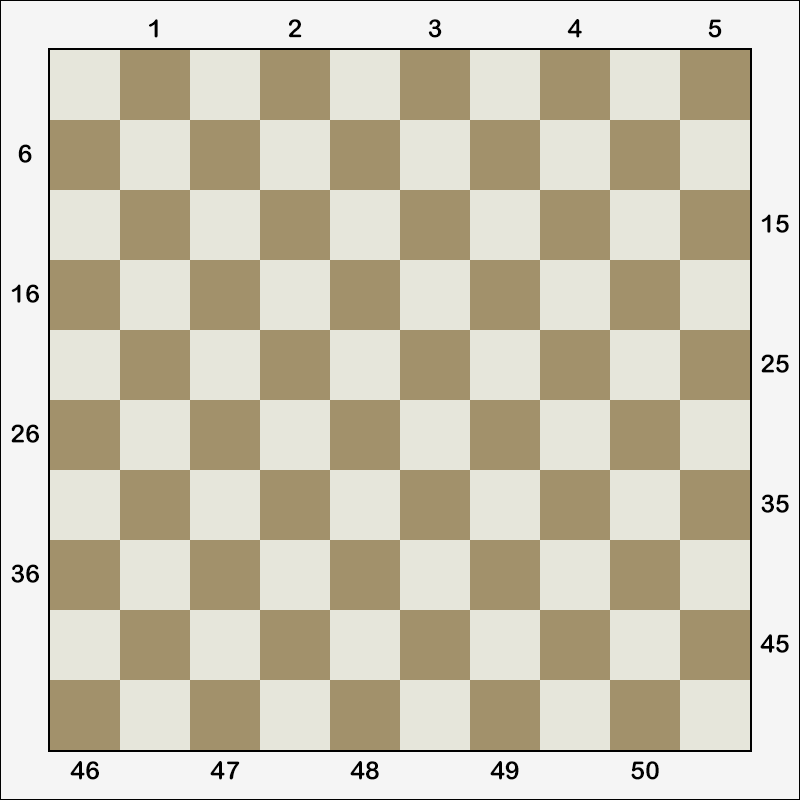
<style>
.page{position:relative;width:800px;height:800px;background:#e6e6db}
.page>*{position:absolute;margin:0}
.t1{font:25px "ArialRoundedMTBold";color:#000000}
</style>
<div class="page">
<p class="t1" style="left:149px;top:19px;width:9px;height:19px">1</p>
<p class="t1" style="left:288px;top:19px;width:14px;height:19px">2</p>
<p class="t1" style="left:428px;top:19px;width:14px;height:19px">3</p>
<p class="t1" style="left:567px;top:19px;width:15px;height:19px">4</p>
<p class="t1" style="left:708px;top:19px;width:14px;height:19px">5</p>
<p class="t1" style="left:18px;top:144px;width:14px;height:19px">6</p>
<p class="t1" style="left:761px;top:214px;width:28px;height:19px">15</p>
<p class="t1" style="left:11px;top:284px;width:28px;height:19px">16</p>
<p class="t1" style="left:761px;top:354px;width:28px;height:19px">25</p>
<p class="t1" style="left:11px;top:424px;width:28px;height:19px">26</p>
<p class="t1" style="left:761px;top:494px;width:28px;height:19px">35</p>
<p class="t1" style="left:11px;top:564px;width:28px;height:19px">36</p>
<p class="t1" style="left:760px;top:634px;width:29px;height:19px">45</p>
<p class="t1" style="left:70px;top:761px;width:29px;height:19px">46</p>
<p class="t1" style="left:210px;top:761px;width:30px;height:19px">47</p>
<p class="t1" style="left:350px;top:761px;width:29px;height:19px">48</p>
<p class="t1" style="left:490px;top:761px;width:29px;height:19px">49</p>
<p class="t1" style="left:631px;top:761px;width:28px;height:19px">50</p>
</div>
